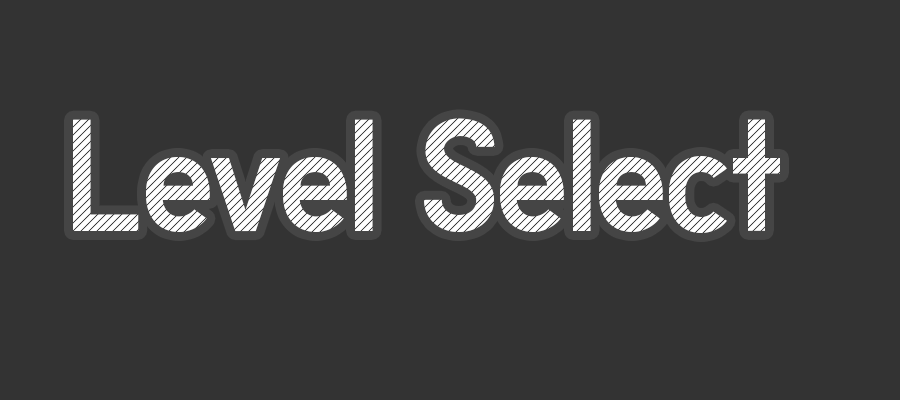
<style>
.page{position:relative;width:900px;height:400px;background:#333333}
.page>*{position:absolute;margin:0}
.t1{font:150px "PlutoniumSans-Regular";color:#ffffff}
</style>
<div class="page">
<p class="t1" style="left:73px;top:118px;width:707px;height:115px">Level Select</p>
</div>
